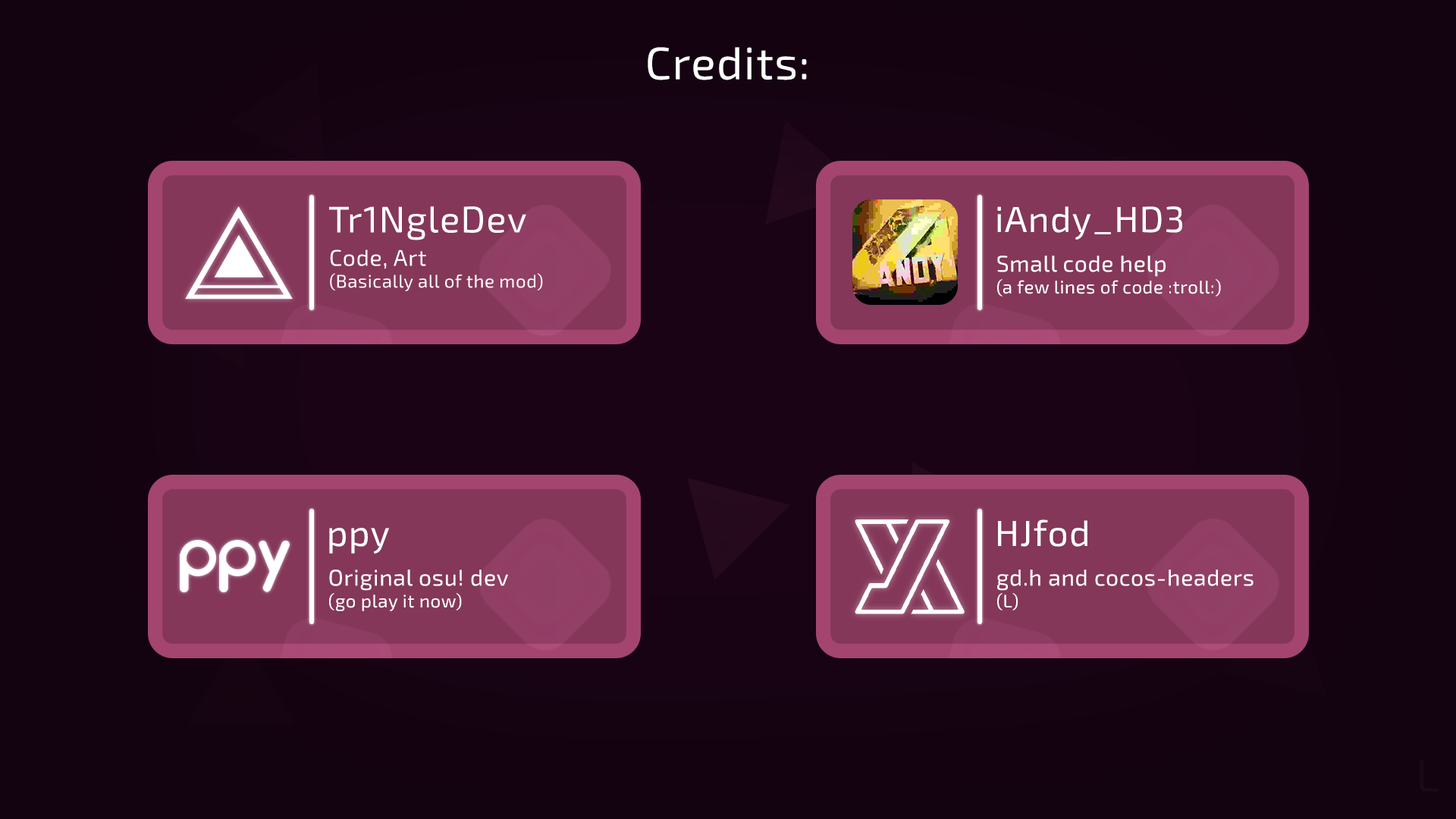
<style>
.page{position:relative;width:1456px;height:819px;background:#130210}
.page>*{position:absolute;margin:0}
.t1{font:36.4px "Exo2.0-Regular";letter-spacing:0.025em;color:#ffffff}
.t2{font:18.2px "Exo2.0-Regular";letter-spacing:0.025em;color:#ffffff}
.t3{font:22.7px "Exo2.0-Regular";letter-spacing:0.025em;color:#ffffff}
.t4{font:22.8px "Exo2.0-Regular";letter-spacing:0.025em;color:#ffffff}
</style>
<div class="page">
<p class="t1" style="left:997px;top:206px;width:185px;height:34px">iAndy_HD3</p>
<p class="t2" style="left:997px;top:256px;width:224px;height:41px"><span class="t3">Small code help<br></span>(a few lines of code :troll:)</p>
<p class="t1" style="left:998px;top:519px;width:89px;height:28px">HJfod</p>
<p class="t1" style="left:329px;top:528px;width:60px;height:26px">ppy</p>
<p class="t4" style="left:329px;top:570px;width:179px;height:41px">Original osu! dev<br><span class="t2">(go play it now)</span></p>
<p class="t3" style="left:997px;top:570px;width:257px;height:40px">gd.h and cocos-headers<br><span class="t2">(L)</span></p>
</div>
